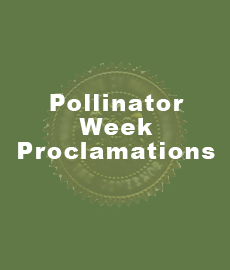
<style>
.page{position:relative;width:230px;height:270px;background:#617947}
.page>*{position:absolute;margin:0}
.t1{font:23px/24px "Arial-Black";letter-spacing:0.065em;color:#ffffff}
</style>
<div class="page">
<p class="t1" style="left:18px;top:94px;width:197px;height:65px;text-align:center">Pollinator<br>Week<br>Proclamations</p>
</div>
